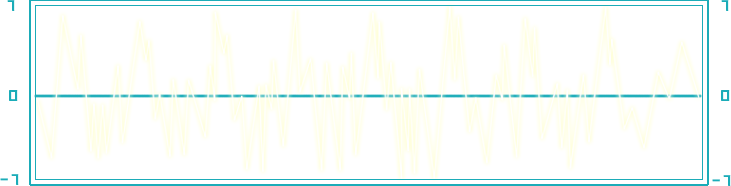
<style>
.page{position:relative;width:731px;height:186px;background:#ffffff}
.page>*{position:absolute;margin:0}
.t1{font:24px "Geo";color:#1bacb8;scale:1.1 1}
</style>
<div class="page">
<p class="t1" style="left:7px;top:0px;width:8px;height:11px">1</p>
<p class="t1" style="left:721px;top:0px;width:8px;height:11px">1</p>
<p class="t1" style="left:9px;top:90px;width:9px;height:11px">0</p>
<p class="t1" style="left:721px;top:90px;width:9px;height:11px">0</p>
<p class="t1" style="left:0px;top:174px;width:19px;height:11px">-1</p>
<p class="t1" style="left:712px;top:175px;width:19px;height:11px">-1</p>
</div>
